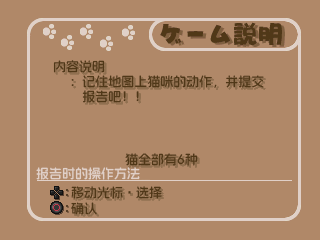
<style>
.page{position:relative;width:320px;height:240px;background:#b08868}
.page>*{position:absolute;margin:0}
.t1{font:13px "AlimamaFangYuanTiVF-SemiBold";color:#503818}
.t2{font:13px/15px "AlimamaFangYuanTiVF-SemiBold";color:#503818}
.t3{font:13px "AlimamaFangYuanTiVF-SemiBold";color:#e0d0c8}
.t4{font:13px "MS-Gothic";color:#503818}
</style>
<div class="page">
<p class="t1" style="left:53px;top:60px;width:52px;height:13px">内容说明</p>
<p class="t2" style="left:71px;top:75px;width:193px;height:28px">：记住地图上猫咪的动作，并提交<br>　报告吧！！</p>
<p class="t1" style="left:125px;top:153px;width:73px;height:13px">猫全部有6种</p>
<p class="t3" style="left:36px;top:167px;width:104px;height:13px">报告时的操作方法</p>
<p class="t1" style="left:71px;top:186px;width:91px;height:13px">移动光标<span class="t4">・</span>选择</p>
<p class="t1" style="left:71px;top:202px;width:26px;height:13px">确认</p>
</div>
